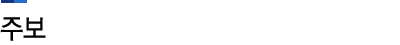
<style>
.page{position:relative;width:400px;height:45px;background:#ffffff}
.page>*{position:absolute;margin:0}
.t1{font:27px "RixGoM";letter-spacing:-0.03em;color:#030303;scale:0.97 1}
</style>
<div class="page">
<p class="t1" style="left:0px;top:17px;width:46px;height:24px">주보</p>
</div>
